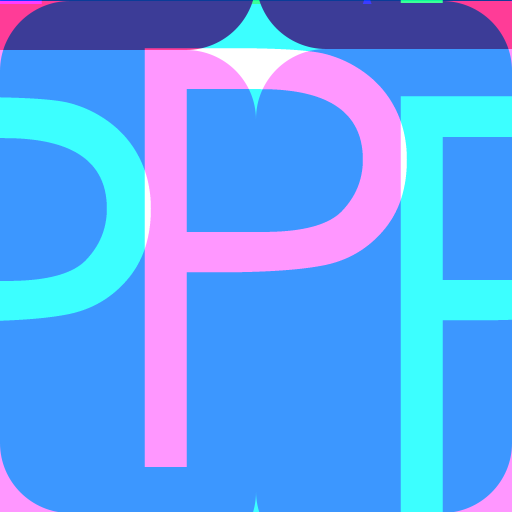
<style>
.page{position:relative;width:512px;height:512px;background:#3c97ff}
.page>*{position:absolute;margin:0}
.t1{font:583.3px "STHeitiSC-Light";color:#ff97ff}
</style>
<div class="page">
<p class="t1" style="left:144px;top:47px;width:263px;height:419px">P</p>
</div>
